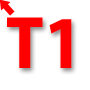
<style>
.page{position:relative;width:90px;height:90px;background:#ffffff}
.page>*{position:absolute;margin:0}
.t1{font:75px "MyriadPro-BoldSemiCn";color:#ff0000}
</style>
<div class="page">
<p class="t1" style="left:7px;top:17px;width:65px;height:51px">T1</p>
</div>
